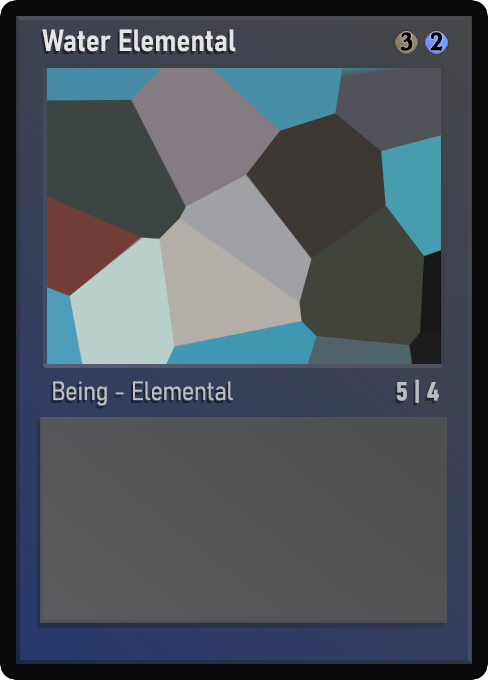
<style>
.page{position:relative;width:488px;height:680px}
.page>*{position:absolute;margin:0}
.t1{font:30px "Bahnschrift-SemiBoldSemiCondensed";color:#f2f2f2;font-weight:bold}
.t2{font:25px "WTRRoycroft";color:#000000;font-weight:bold;scale:1.09 1}
.t3{font:26px "Bahnschrift-LightSemiCondensed";color:#c8c8c8;font-weight:bold}
.t4{font:26px "Bahnschrift-BoldSemiCondensed";color:#bcbdc0;font-weight:bold}
</style>
<div class="page">
<p class="t1" style="left:42px;top:29px;width:194px;height:23px;opacity:0.9">Water Elemental</p>
<p class="t2" style="left:400px;top:32px;width:13px;height:19px">3</p>
<p class="t2" style="left:430px;top:32px;width:13px;height:19px">2</p>
<p class="t3" style="left:53px;top:381px;width:180px;height:25px;opacity:0.9">Being - Elemental</p>
<p class="t4" style="left:396px;top:379px;width:43px;height:24px">5 | 4</p>
</div>
